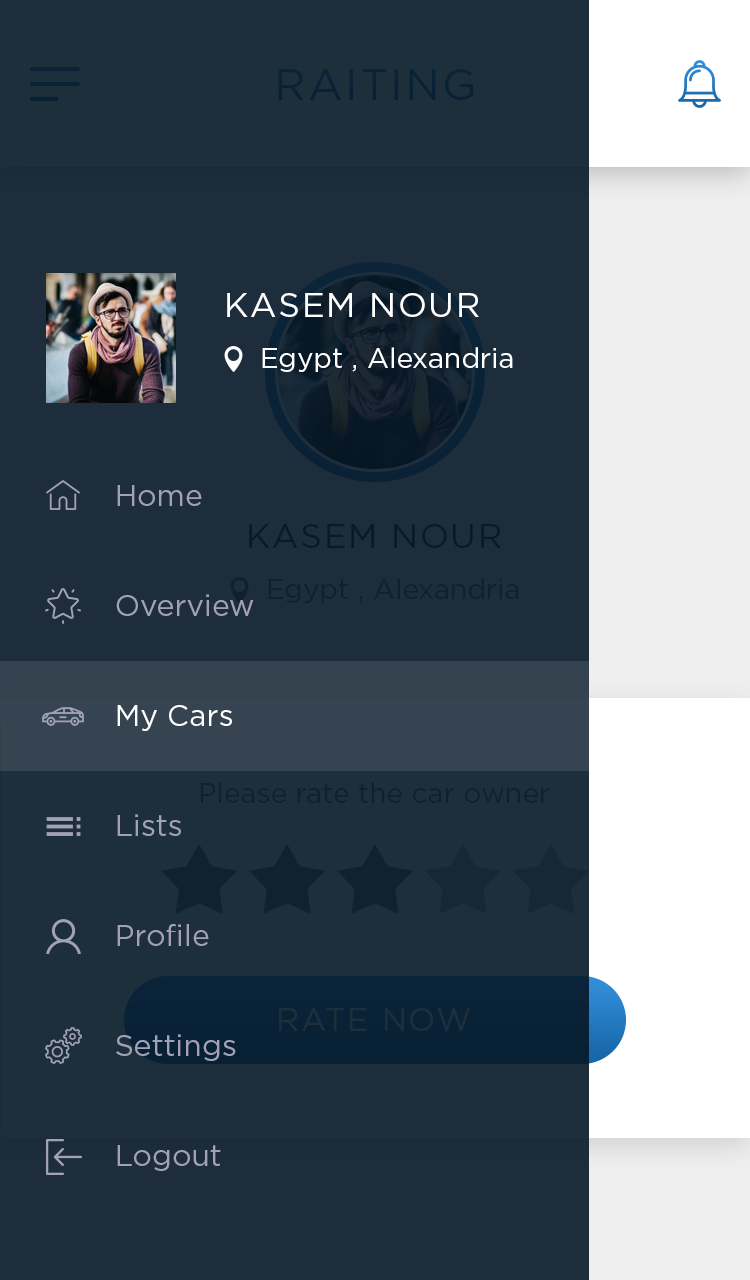
<style>
.page{position:relative;width:750px;height:1280px;background:#1d2d3b}
.page>*{position:absolute;margin:0}
.t1{font:44px "Gotham-Book";letter-spacing:0.05em;color:#092236;text-transform:uppercase}
.t2{font:34px "Gotham-Book";letter-spacing:0.05em;color:#ffffff;text-transform:uppercase}
.t3{font:28px "Gotham-Book";color:#ffffff}
.t4{font:30px/110px "Gotham-Book";color:#a2a1b8}
.t5{font:30px/110px "Gotham-Book";color:#ffffff}
.t6{font:34px "Gotham-Book";letter-spacing:0.05em;color:#091927;text-transform:uppercase}
.t7{font:28px "Gotham-Book";color:#10202e}
.t8{font:32px "Gotham-Book";letter-spacing:0.05em;color:#1e2f3c;text-transform:uppercase}
</style>
<div class="page">
<p class="t1" style="left:278px;top:69px;width:195px;height:31px">Raiting</p>
<p class="t2" style="left:227px;top:293px;width:252px;height:24px">KASEM NOUR</p>
<p class="t3" style="left:262px;top:347px;width:251px;height:25px">Egypt , Alexandria</p>
<p class="t4" style="left:116px;top:485px;width:138px;height:686px;text-align:right">Home<br>Overview<br><span class="t5">My Cars<br></span>Lists<br>Profile<br>Settings<br>Logout</p>
<p class="t6" style="left:249px;top:524px;width:252px;height:24px">KASEM NOUR</p>
<p class="t7" style="left:268px;top:578px;width:251px;height:25px">Egypt , Alexandria</p>
<p class="t7" style="left:200px;top:782px;width:350px;height:21px">Please rate the car owner</p>
<p class="t8" style="left:279px;top:1008px;width:191px;height:23px">RATE NOW</p>
</div>
